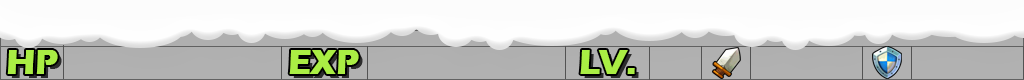
<style>
.page{position:relative;width:1024px;height:80px;background:#fcfcfc}
.page>*{position:absolute;margin:0}
.t1{font:36px "ErasITC-Bold";color:#aaee44}
</style>
<div class="page">
<p class="t1" style="left:7px;top:50px;width:51px;height:24px">HP</p>
<p class="t1" style="left:289px;top:50px;width:70px;height:24px">EXP</p>
<p class="t1" style="left:580px;top:50px;width:55px;height:24px">LV.</p>
</div>
